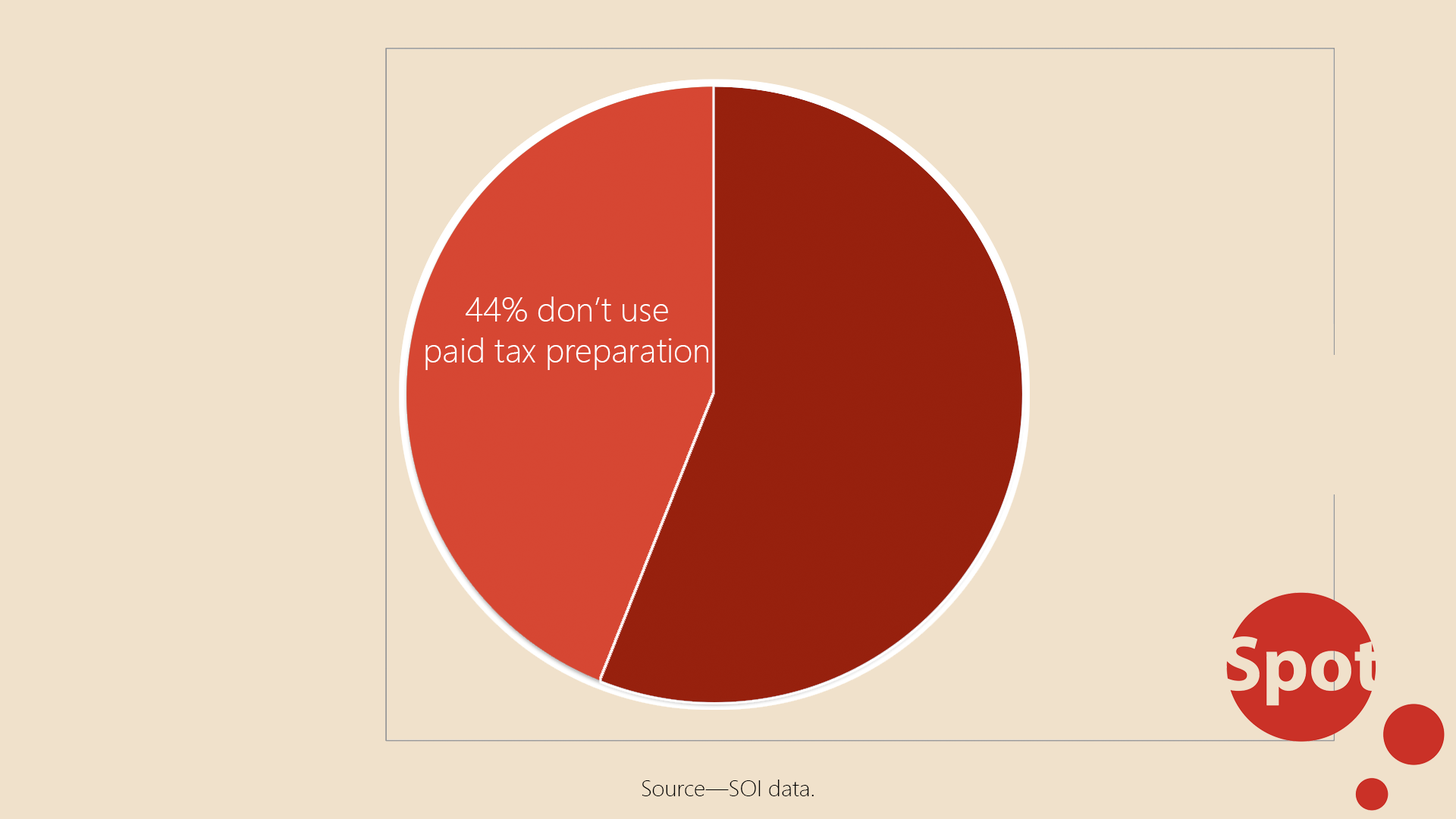
<style>
.page{position:relative;width:1456px;height:819px;background:#f0e1cb}
.page>*{position:absolute;margin:0}
.t1{font:34.1px "SegoeUI-Light";color:#ffffff}
.t2{font:22.7px "SegoeUI-Light";color:#000000}
</style>
<div class="page">
<p class="t1" style="left:425px;top:297px;width:283px;height:73px;text-align:center">44% don’t use<br>paid tax preparation</p>
<p class="t2" style="left:642px;top:780px;width:172px;height:16px">Source—SOI data.</p>
</div>
